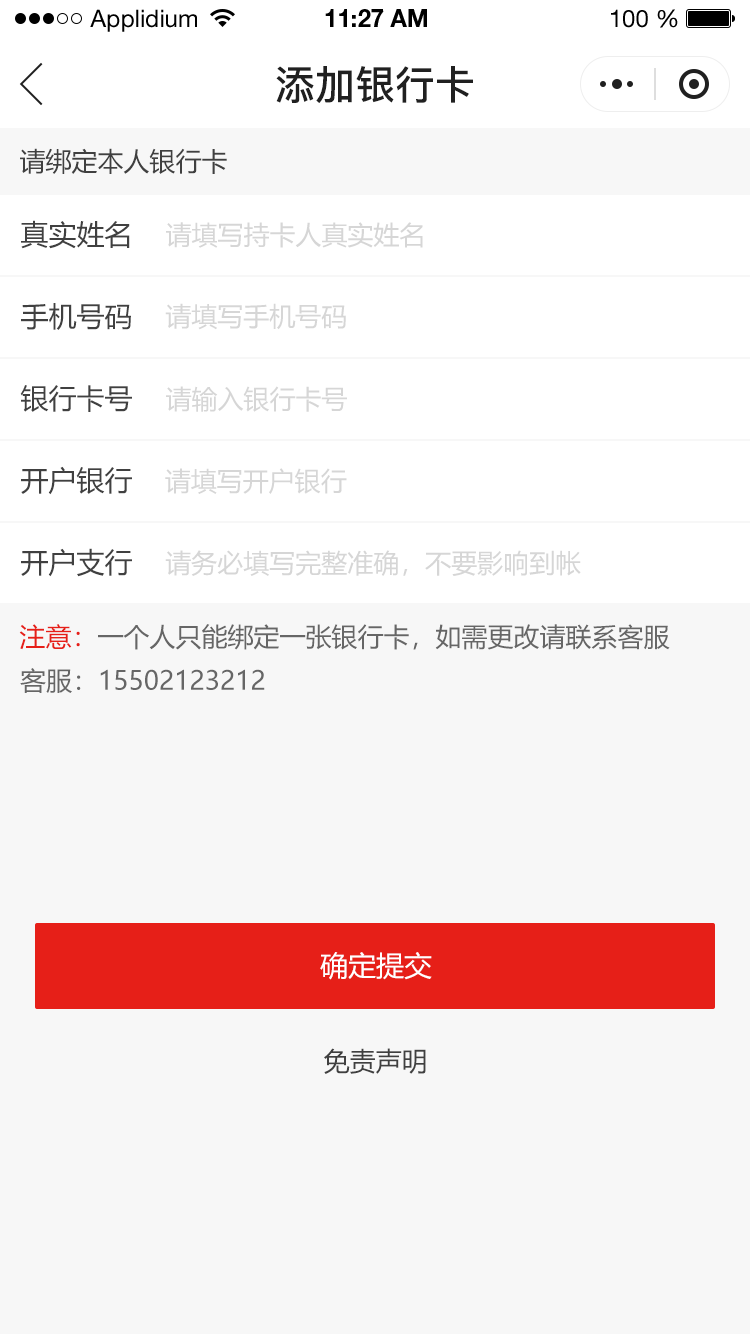
<style>
.page{position:relative;width:750px;height:1334px;background:#f7f7f7}
.page>*{position:absolute;margin:0}
.t1{font:24px "HelveticaNeueLTStd-Roman";color:#000000}
.t2{font:24px "HelveticaNeueLTStd-Bd";color:#000000}
.t3{font:40px "PingFang-SC-Bold";color:#202020;text-transform:uppercase}
.t4{font:26px "MicrosoftYaHei";color:#404040;text-transform:uppercase}
.t5{font:28px "MicrosoftYaHei";color:#404040;text-transform:uppercase}
.t6{font:26px "MicrosoftYaHei";color:#d6d6d6;text-transform:uppercase}
.t7{font:26px "MicrosoftYaHei";color:#666666;text-transform:uppercase}
.t8{font:26px "MicrosoftYaHei";color:#e61f18;text-transform:uppercase}
.t9{font:28px "MicrosoftYaHei";color:#ffffff;text-transform:uppercase}
</style>
<div class="page">
<p class="t1" style="left:90px;top:9px;width:107px;height:23px">Applidium</p>
<p class="t2" style="left:325px;top:9px;width:102px;height:18px">11:27 AM</p>
<p class="t1" style="left:611px;top:9px;width:67px;height:19px">100 %</p>
<p class="t3" style="left:276px;top:66px;width:197px;height:37px">添加银行卡</p>
<p class="t4" style="left:20px;top:148px;width:207px;height:26px">请绑定本人银行卡</p>
<p class="t5" style="left:21px;top:220px;width:109px;height:29px">真实姓名</p>
<p class="t6" style="left:166px;top:222px;width:257px;height:26px">请填写持卡人真实姓名</p>
<p class="t5" style="left:21px;top:303px;width:110px;height:27px">手机号码</p>
<p class="t6" style="left:165px;top:303px;width:181px;height:27px">请填写手机号码</p>
<p class="t5" style="left:20px;top:385px;width:112px;height:27px">银行卡号</p>
<p class="t6" style="left:166px;top:386px;width:181px;height:26px">请输入银行卡号</p>
<p class="t5" style="left:21px;top:466px;width:111px;height:29px">开户银行</p>
<p class="t6" style="left:165px;top:468px;width:182px;height:26px">请填写开户银行</p>
<p class="t5" style="left:21px;top:548px;width:111px;height:29px">开户支行</p>
<p class="t6" style="left:165px;top:550px;width:416px;height:26px">请务必填写完整准确，不要影响到帐</p>
<p class="t7" style="left:19px;top:624px;width:651px;height:26px"><span class="t8">注意：</span>一个人只能绑定一张银行卡，如需更改请联系客服</p>
<p class="t7" style="left:20px;top:668px;width:245px;height:25px">客服：15502123212</p>
<p class="t9" style="left:320px;top:952px;width:112px;height:28px">确定提交</p>
<p class="t4" style="left:324px;top:1048px;width:102px;height:26px">免责声明</p>
</div>
